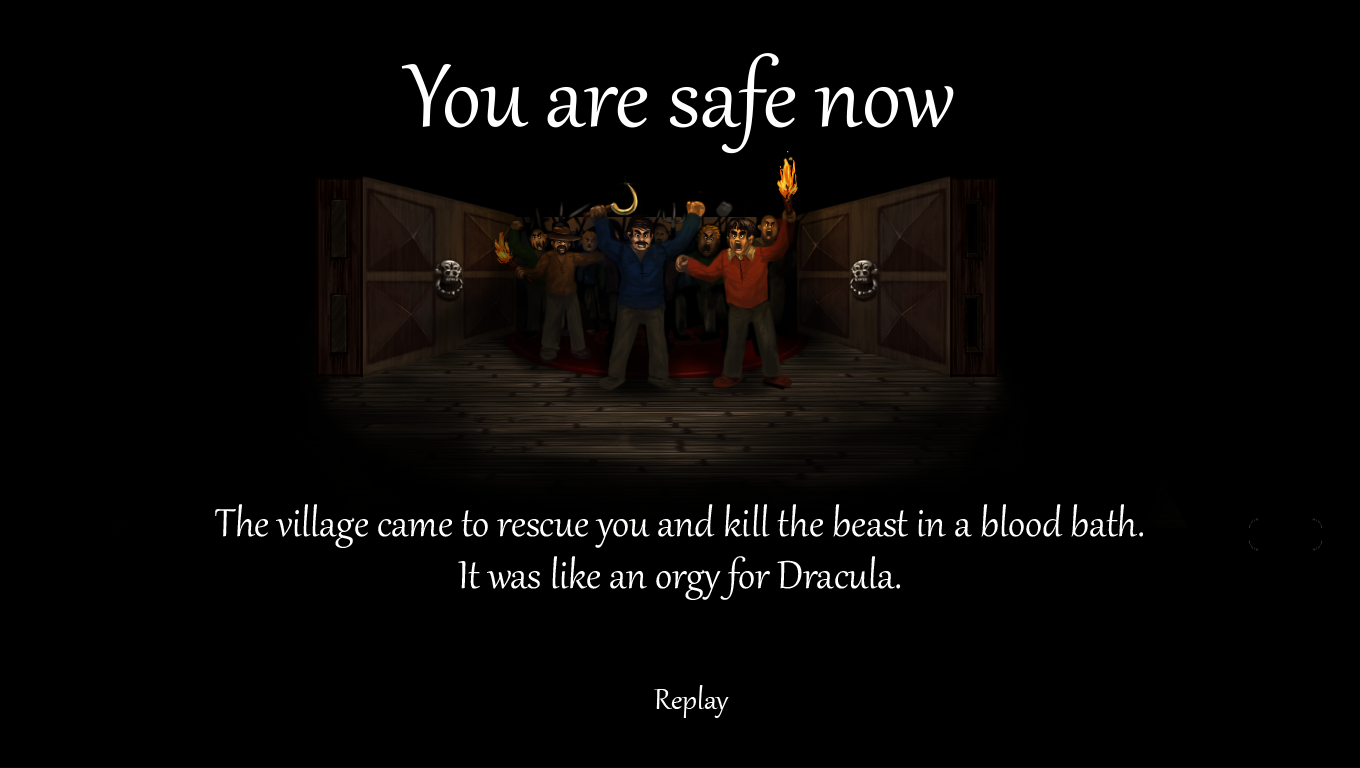
<style>
.page{position:relative;width:1360px;height:768px;background:#000000}
.page>*{position:absolute;margin:0}
.t1{font:110px "Gabriola";color:#ffffff}
.t2{font:48px/52px "Gabriola";color:#ffffff}
.t3{font:36px "Gabriola";color:#ffffff}
</style>
<div class="page">
<p class="t1" style="left:401px;top:53px;width:553px;height:101px">You are safe now</p>
<p class="t2" style="left:215px;top:504px;width:928px;height:96px;text-align:center">The village came to rescue you and kill the beast in a blood bath.<br>It was like an orgy for Dracula.</p>
<p class="t3" style="left:654px;top:685px;width:75px;height:33px">Replay</p>
</div>
